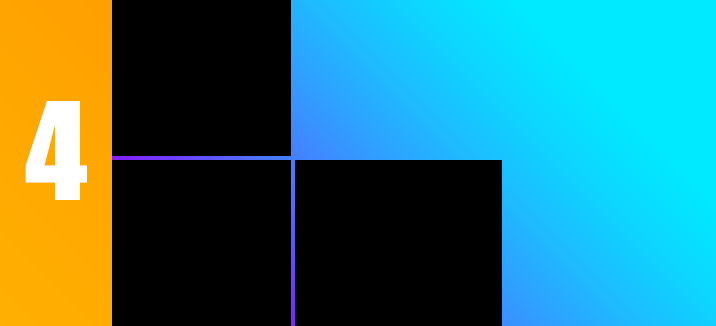
<style>
.page{position:relative;width:716px;height:326px;background:#000000}
.page>*{position:absolute;margin:0}
.t1{font:125px "Impact";color:#ffffff}
</style>
<div class="page">
<p class="t1" style="left:25px;top:101px;width:62px;height:99px">4</p>
</div>
